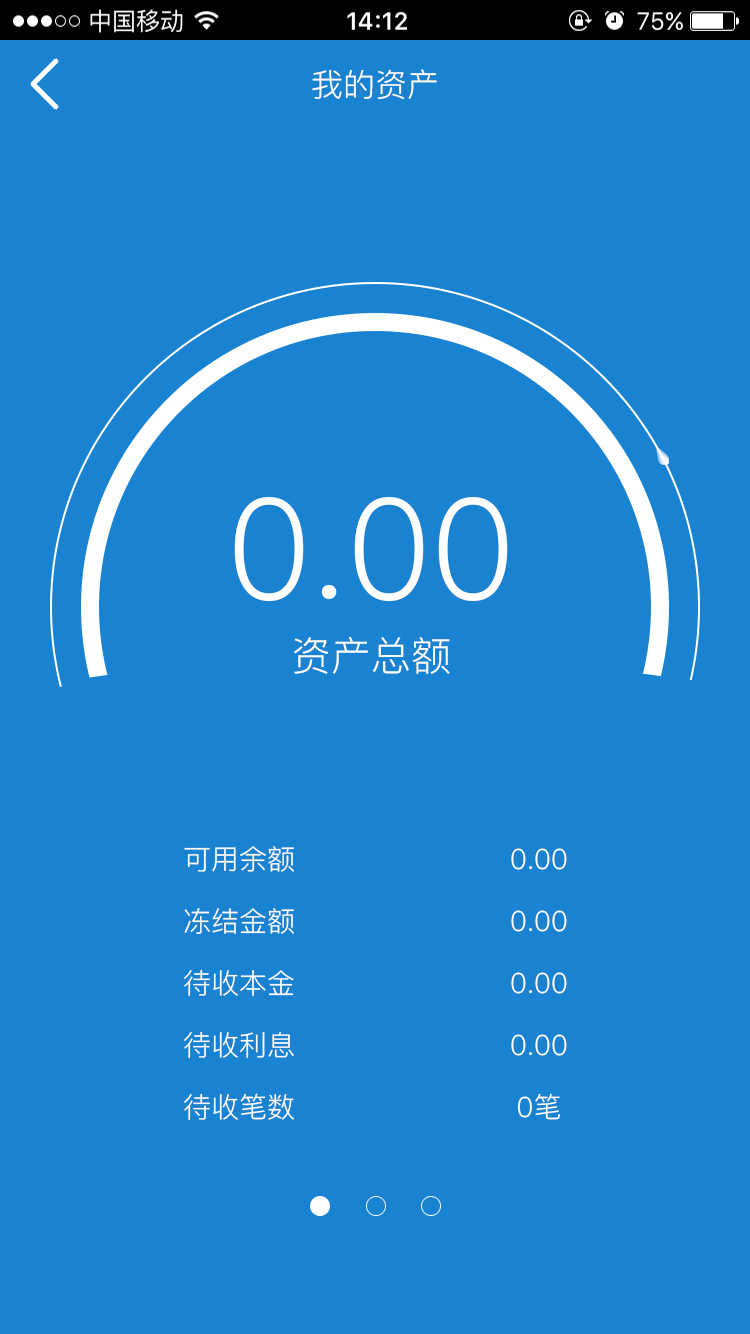
<style>
.page{position:relative;width:750px;height:1334px;background:#1a83d1}
.page>*{position:absolute;margin:0}
.t1{font:32px "PingFang-SC-Regular";color:#ffffff}
.t2{font:140px "PingFang-SC-Regular";color:#ffffff}
.t3{font:40px "PingFang-SC-Regular";color:#ffffff}
.t4{font:28px "PingFang-SC-Regular";color:#ffffff}
</style>
<div class="page">
<p class="t1" style="left:312px;top:69px;width:125px;height:31px">我的资产</p>
<p class="t2" style="left:234px;top:497px;width:274px;height:104px">0.00</p>
<p class="t3" style="left:294px;top:637px;width:156px;height:37px">资产总额</p>
<p class="t4" style="left:184px;top:846px;width:110px;height:26px">可用余额</p>
<p class="t4" style="left:511px;top:848px;width:56px;height:22px">0.00</p>
<p class="t4" style="left:184px;top:908px;width:110px;height:26px">冻结金额</p>
<p class="t4" style="left:511px;top:910px;width:56px;height:22px">0.00</p>
<p class="t4" style="left:184px;top:969px;width:110px;height:27px">待收本金</p>
<p class="t4" style="left:511px;top:972px;width:56px;height:22px">0.00</p>
<p class="t4" style="left:184px;top:1031px;width:110px;height:27px">待收利息</p>
<p class="t4" style="left:511px;top:1034px;width:56px;height:22px">0.00</p>
<p class="t4" style="left:184px;top:1093px;width:110px;height:27px">待收笔数</p>
<p class="t4" style="left:517px;top:1093px;width:43px;height:27px">0笔</p>
</div>
